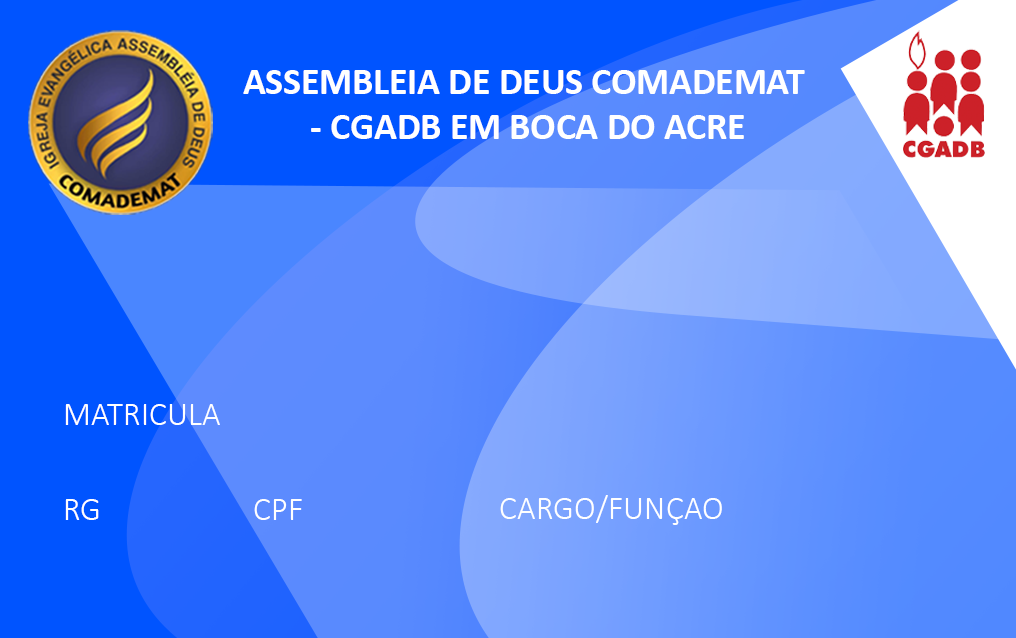
<style>
.page{position:relative;width:1016px;height:638px;background:#0054ff}
.page>*{position:absolute;margin:0}
.t1{font:37.5px "Calibri-Bold";color:#ffffff}
.t2{font:33.3px "Calibri-Light";color:#ffffff}
</style>
<div class="page">
<p class="t1" style="left:243px;top:70px;width:562px;height:69px;text-align:center">ASSEMBLEIA DE DEUS COMADEMAT <br>- CGADB EM BOCA DO ACRE</p>
<p class="t2" style="left:65px;top:404px;width:155px;height:21px">MATRICULA</p>
<p class="t2" style="left:500px;top:495px;width:222px;height:30px">CARGO/FUNÇAO</p>
<p class="t2" style="left:65px;top:499px;width:34px;height:21px">RG</p>
<p class="t2" style="left:254px;top:499px;width:48px;height:21px">CPF</p>
</div>
